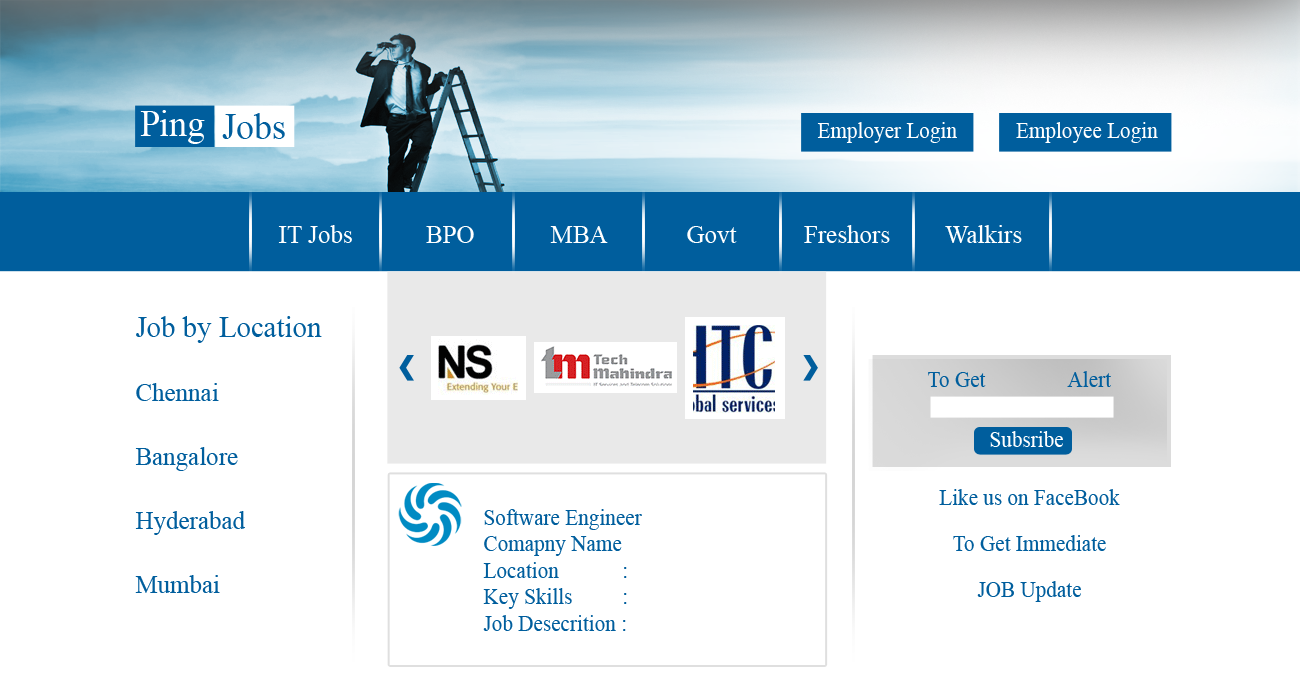
<style>
.page{position:relative;width:1300px;height:699px;background:#ffffff}
.page>*{position:absolute;margin:0}
.t1{font:37.2px "TimesNewRomanPSMT";color:#ffffff;scale:0.96 1}
.t2{font:37.2px "TimesNewRomanPSMT";color:#005e9d;scale:0.96 1}
.t3{font:22px "TimesNewRomanPSMT";color:#ffffff;scale:0.96 1}
.t4{font:26px "TimesNewRomanPSMT";color:#ffffff;scale:0.96 1}
.t5{font:26px/64px "TimesNewRomanPSMT";color:#005e9d;scale:0.96 1}
.t6{font:30px "TimesNewRomanPSMT";color:#005e9d;scale:0.96 1}
.t7{font:22px "TimesNewRomanPSMT";color:#005e9d;scale:0.96 1}
.t8{font:22px/46px "TimesNewRomanPSMT";color:#005e9d;scale:0.96 1}
</style>
<div class="page">
<p class="t1" style="left:140px;top:110px;width:65px;height:34px">Ping</p>
<p class="t2" style="left:222px;top:113px;width:63px;height:26px">Jobs</p>
<p class="t3" style="left:817px;top:122px;width:140px;height:21px">Employer Login</p>
<p class="t3" style="left:1016px;top:122px;width:142px;height:21px">Employee Login</p>
<p class="t4" style="left:278px;top:225px;width:74px;height:18px">IT Jobs</p>
<p class="t4" style="left:426px;top:226px;width:48px;height:17px">BPO</p>
<p class="t4" style="left:550px;top:226px;width:58px;height:17px">MBA</p>
<p class="t4" style="left:687px;top:226px;width:50px;height:17px">Govt</p>
<p class="t4" style="left:804px;top:225px;width:86px;height:18px">Freshors</p>
<p class="t4" style="left:945px;top:225px;width:77px;height:18px">Walkirs</p>
<p class="t5" style="left:135px;top:316px;width:187px;height:277px"><span class="t6">Job by Location<br></span>Chennai<br>Bangalore<br>Hyderabad<br>Mumbai</p>
<p class="t7" style="left:928px;top:372px;width:58px;height:15px">To Get</p>
<p class="t7" style="left:1067px;top:371px;width:44px;height:16px">Alert</p>
<p class="t3" style="left:990px;top:431px;width:73px;height:16px">Subsribe</p>
<p class="t8" style="left:939px;top:489px;width:181px;height:113px;text-align:center">Like us on FaceBook<br>To Get Immediate<br>JOB Update</p>
<p class="t7" style="left:483px;top:509px;width:159px;height:122px">Software Engineer<br>Comapny Name<br>Location   :<br>Key Skills   : <br>Job Desecrition :</p>
</div>
